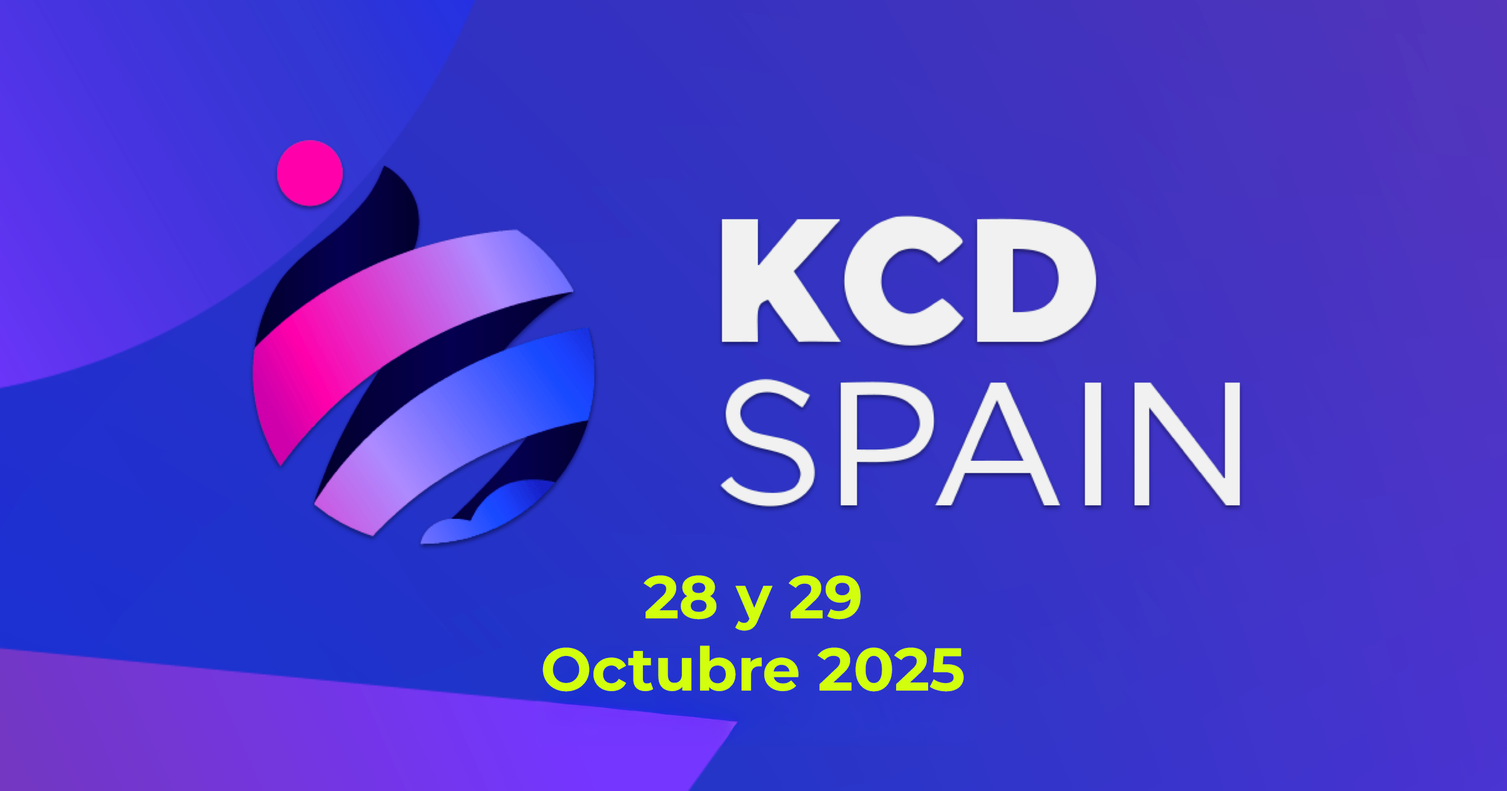
<style>
.page{position:relative;width:1507px;height:791px}
.page>*{position:absolute;margin:0}
.t1{font:60.3px "Montserrat-Bold";color:#d2ff0d}
</style>
<div class="page">
<p class="t1" style="left:543px;top:575px;width:421px;height:117px;text-align:center">28 y 29<br>Octubre 2025</p>
</div>
